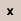
<style>
.page{position:relative;width:21px;height:21px;background:#d9cdc1}
.page>*{position:absolute;margin:0}
.t1{font:9px "Tahoma-Bold";color:#000000}
</style>
<div class="page">
<p class="t1" style="left:7px;top:8px;width:7px;height:7px">X</p>
</div>
